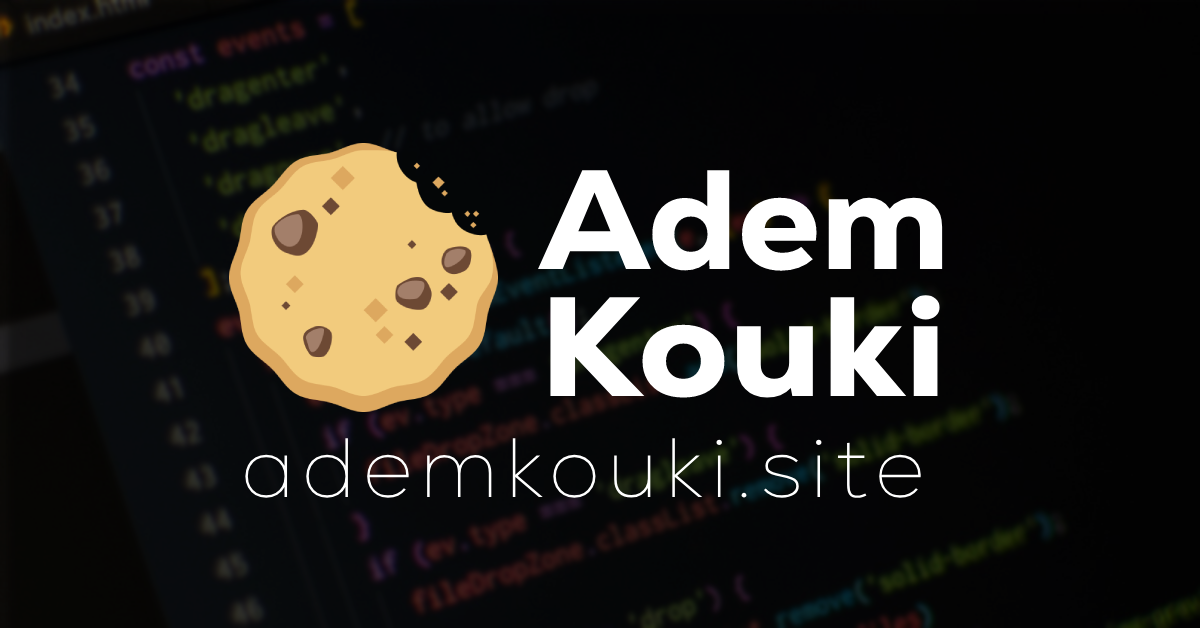
<style>
.page{position:relative;width:1200px;height:628px}
.page>*{position:absolute;margin:0}
.t1{font:141px "Nexa-Trial-Heavy";color:#ffffff;scale:1.07 1}
.t2{font:141px "Nexa-Trial-Heavy";color:#ffffff}
.t3{font:84px "Nexa-Trial-Thin";letter-spacing:0.092em;color:#ffffff}
</style>
<div class="page">
<p class="t1" style="left:538px;top:170px;width:405px;height:228px"><span class="t2">Adem<br></span>Kouki</p>
<p class="t3" style="left:245px;top:438px;width:676px;height:60px">ademkouki.site</p>
</div>
